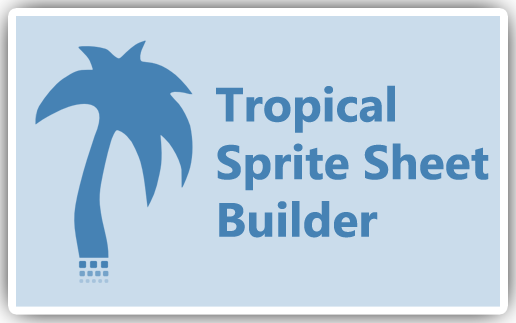
<style>
.page{position:relative;width:516px;height:323px;background:#cadceb}
.page>*{position:absolute;margin:0}
.t1{font:48px "SegoeUI-Bold";color:#4682b4}
</style>
<div class="page">
<p class="t1" style="left:216px;top:85px;width:273px;height:153px">Tropical<br>Sprite Sheet <br>Builder</p>
</div>
